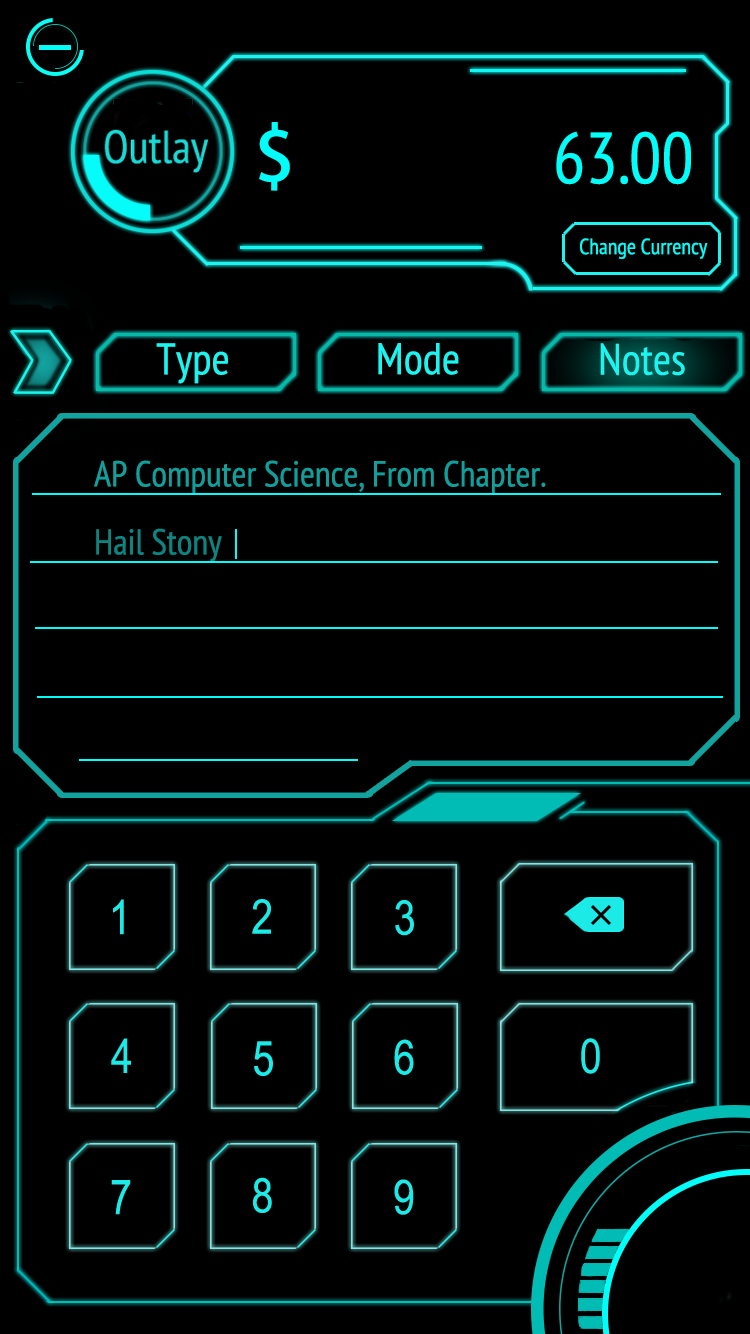
<style>
.page{position:relative;width:750px;height:1334px;background:#000000}
.page>*{position:absolute;margin:0}
.t1{font:72px "PTSans-Narrow";color:#00fff8}
.t2{font:72px "AdobeHeitiStd-Regular";color:#00fff8}
.t3{font:22px "PTSans-Narrow";color:#00fff8}
.t4{font:44px "PTSans-Narrow";color:#1cf4ef}
.t5{font:36px "PTSans-Narrow";color:#129f9b}
.t6{font:36px "PTSans-Narrow";color:#0d8480}
</style>
<div class="page">
<p class="t1" style="left:259px;top:122px;width:432px;height:69px"><span class="t2">$                </span>63.00</p>
<p class="t3" style="left:580px;top:238px;width:128px;height:21px">Change Currency</p>
<p class="t4" style="left:156px;top:343px;width:72px;height:41px">Type</p>
<p class="t4" style="left:378px;top:343px;width:81px;height:32px">Mode</p>
<p class="t4" style="left:600px;top:343px;width:85px;height:33px">Notes</p>
<p class="t5" style="left:94px;top:460px;width:452px;height:34px">AP Computer Science, From Chapter.</p>
<p class="t6" style="left:96px;top:528px;width:126px;height:34px">Hail Stony</p>
</div>
